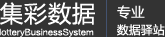
<style>
.page{position:relative;width:165px;height:37px;background:#333333}
.page>*{position:absolute;margin:0}
.t1{font:24px "FZLTHJW--GB1-0";color:#ffffff}
.t2{font:14px "FZLTHJW--GB1-0";color:#ffffff}
.t3{font:8.1px "FZLTHJW--GB1-0";color:#ffffff;scale:1.05 1}
.t4{font:12px "FZLTHJW--GB1-0";color:#ffffff}
</style>
<div class="page">
<p class="t1" style="left:0px;top:2px;width:95px;height:23px">集彩数据</p>
<p class="t2" style="left:117px;top:5px;width:28px;height:14px">专业</p>
<p class="t3" style="left:0px;top:28px;width:94px;height:9px">lotteryBusinessSystem</p>
<p class="t4" style="left:117px;top:24px;width:48px;height:12px">数据驿站</p>
</div>
